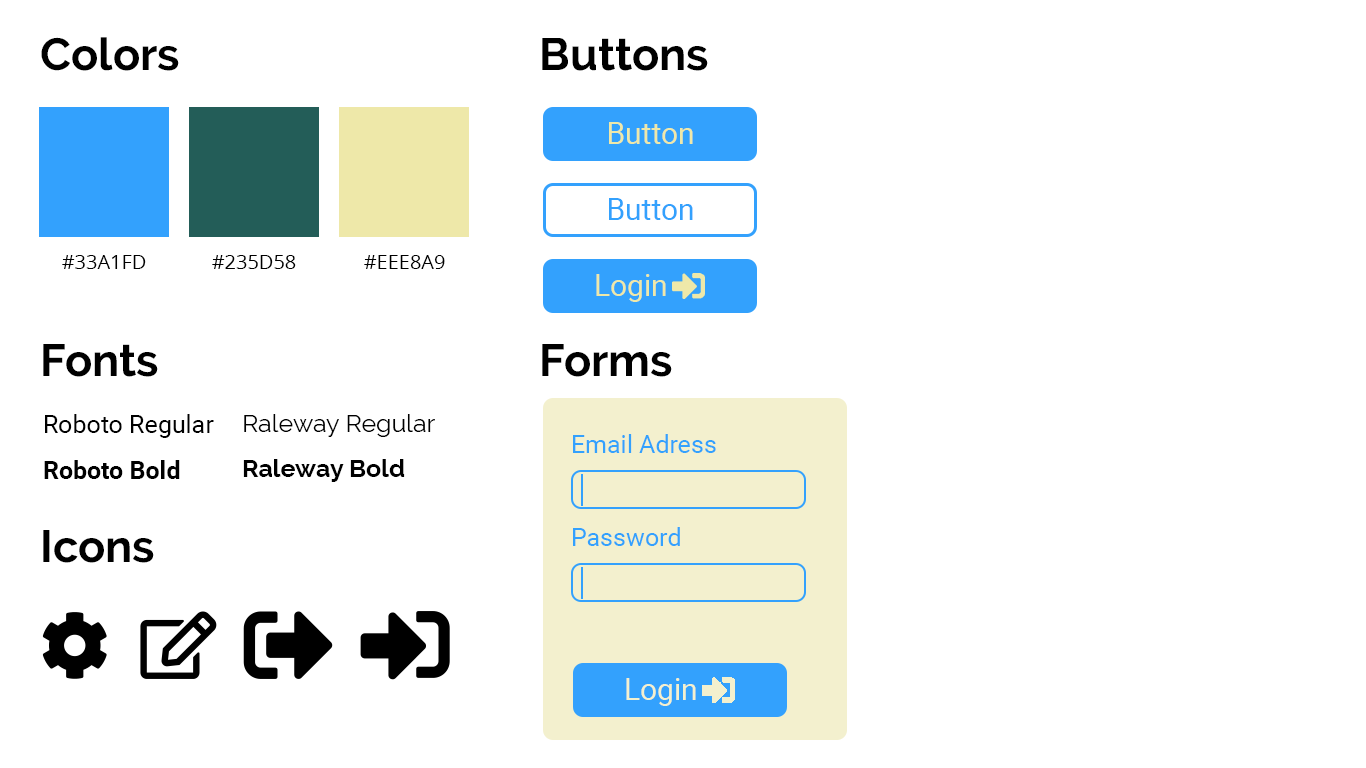
<style>
.page{position:relative;width:1366px;height:768px;background:#ffffff}
.page>*{position:absolute;margin:0}
.t1{font:45px "Raleway-Bold";color:#000000}
.t2{font:30px "Roboto-Regular";color:#eee8a9}
.t3{font:30px "Roboto-Regular";color:#33a1fd}
.t4{font:20px "OpenSans";color:#000000}
.t5{font:25px "Roboto-Regular";color:#000000}
.t6{font:25px "Raleway-Regular";color:#000000}
.t7{font:25px "Roboto-Regular";color:#33a1fd}
.t8{font:25px "Roboto-Bold";color:#000000}
.t9{font:25px "Raleway-Bold";color:#000000}
.t10{font:30px "Roboto-Regular";color:#f3f0ce}
</style>
<div class="page">
<p class="t1" style="left:41px;top:37px;width:138px;height:34px">Colors</p>
<p class="t1" style="left:542px;top:38px;width:166px;height:33px">Buttons</p>
<p class="t2" style="left:609px;top:122px;width:84px;height:22px">Button</p>
<p class="t3" style="left:609px;top:198px;width:84px;height:22px">Button</p>
<p class="t4" style="left:62px;top:255px;width:84px;height:14px">#33A1FD</p>
<p class="t4" style="left:212px;top:255px;width:84px;height:14px">#235D58</p>
<p class="t4" style="left:364px;top:255px;width:81px;height:14px">#EEE8A9</p>
<p class="t2" style="left:596px;top:274px;width:70px;height:28px">Login</p>
<p class="t1" style="left:43px;top:344px;width:115px;height:33px">Fonts</p>
<p class="t1" style="left:542px;top:344px;width:130px;height:33px">Forms</p>
<p class="t5" style="left:45px;top:414px;width:169px;height:24px">Roboto Regular</p>
<p class="t6" style="left:244px;top:414px;width:191px;height:23px">Raleway Regular</p>
<p class="t7" style="left:573px;top:434px;width:143px;height:19px">Email Adress</p>
<p class="t8" style="left:44px;top:460px;width:136px;height:19px">Roboto Bold</p>
<p class="t9" style="left:243px;top:459px;width:162px;height:23px">Raleway Bold</p>
<p class="t1" style="left:43px;top:530px;width:111px;height:33px">Icons</p>
<p class="t7" style="left:573px;top:527px;width:107px;height:19px">Password</p>
<p class="t10" style="left:626px;top:678px;width:70px;height:28px">Login</p>
</div>
